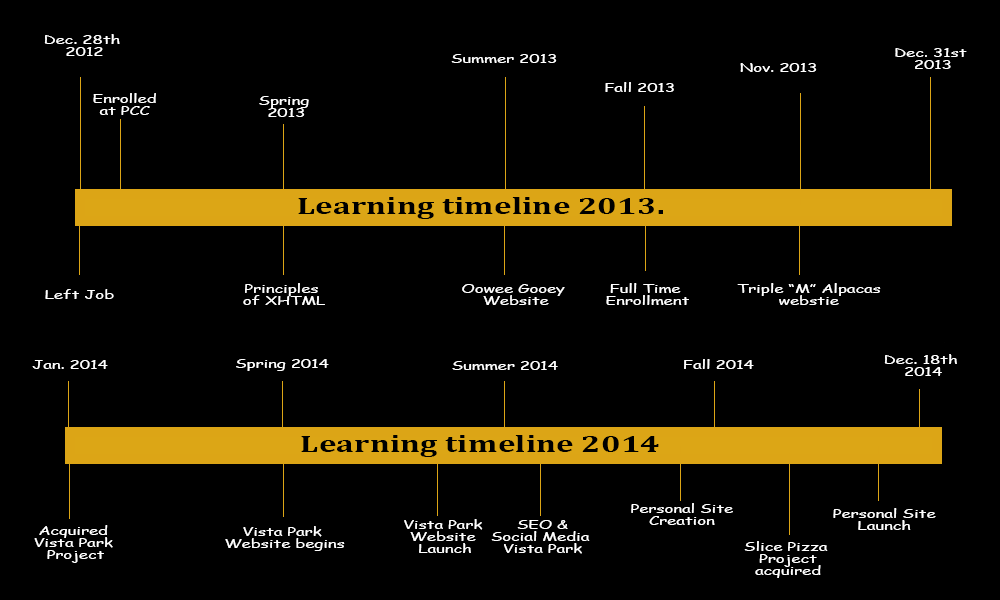
<style>
.page{position:relative;width:1000px;height:600px;background:#000000}
.page>*{position:absolute;margin:0}
.t1{font:12px/12px "ComicSansMS";color:#ffffff;scale:1.39 1}
.t2{font:12px "ComicSansMS";color:#ffffff;scale:1.39 1}
.t3{font:24px "Cambria-Bold";color:#000000;scale:1.39 1}
</style>
<div class="page">
<p class="t1" style="left:44px;top:34px;width:76px;height:22px;text-align:center">Dec. 28th <br>2012</p>
<p class="t2" style="left:451px;top:54px;width:106px;height:9px">Summer 2013</p>
<p class="t1" style="left:895px;top:48px;width:72px;height:21px;text-align:center">Dec. 31st <br>2013</p>
<p class="t2" style="left:740px;top:63px;width:77px;height:9px">Nov. 2013</p>
<p class="t2" style="left:605px;top:82px;width:69px;height:10px">Fall 2013</p>
<p class="t1" style="left:93px;top:93px;width:63px;height:22px;text-align:center">Enrolled<br>at PCC</p>
<p class="t1" style="left:259px;top:96px;width:50px;height:21px;text-align:center">Spring <br>2013</p>
<p class="t3" style="left:298px;top:197px;width:365px;height:22px">Learning timeline 2013.</p>
<p class="t2" style="left:45px;top:289px;width:69px;height:10px">Left Job</p>
<p class="t1" style="left:243px;top:283px;width:82px;height:22px;text-align:center">Principles <br>of XHTML</p>
<p class="t1" style="left:462px;top:284px;width:103px;height:21px;text-align:center">Oowee Gooey <br>Website</p>
<p class="t1" style="left:606px;top:283px;width:83px;height:22px;text-align:center">Full Time <br>Enrollment</p>
<p class="t1" style="left:737px;top:283px;width:144px;height:22px;text-align:center">Triple “M” Alpacas<br>webstie</p>
<p class="t2" style="left:32px;top:360px;width:76px;height:9px">Jan. 2014</p>
<p class="t2" style="left:236px;top:359px;width:93px;height:12px">Spring 2014</p>
<p class="t2" style="left:452px;top:361px;width:106px;height:9px">Summer 2014</p>
<p class="t2" style="left:684px;top:359px;width:70px;height:10px">Fall 2014</p>
<p class="t1" style="left:884px;top:354px;width:73px;height:22px;text-align:center">Dec. 18th <br>2014</p>
<p class="t3" style="left:301px;top:435px;width:358px;height:22px">Learning timeline 2014</p>
<p class="t1" style="left:631px;top:503px;width:102px;height:22px;text-align:center">Personal Site<br>Creation</p>
<p class="t1" style="left:833px;top:508px;width:103px;height:22px;text-align:center">Personal Site<br>Launch</p>
<p class="t1" style="left:404px;top:519px;width:79px;height:34px;text-align:center">Vista Park <br>Website <br>Launch</p>
<p class="t1" style="left:491px;top:520px;width:99px;height:34px;text-align:center">SEO &amp;<br>Social Media <br>Vista Park</p>
<p class="t1" style="left:34px;top:525px;width:79px;height:38px;text-align:center">Acquired <br>Vista Park <br>Project</p>
<p class="t1" style="left:225px;top:526px;width:120px;height:25px;text-align:center">Vista Park <br>Website begins</p>
<p class="t1" style="left:744px;top:541px;width:84px;height:37px;text-align:center">Slice Pizza <br>Project<br>acquired</p>
</div>
